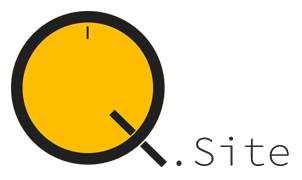
<style>
.page{position:relative;width:302px;height:180px;background:#ffffff}
.page>*{position:absolute;margin:0}
.t1{font:41.7px "SourceCodeRoman-Light";color:#302c29}
</style>
<div class="page">
<p class="t1" style="left:176px;top:136px;width:113px;height:30px">.Site</p>
</div>
